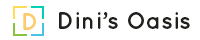
<style>
.page{position:relative;width:200px;height:40px;background:#ffffff}
.page>*{position:absolute;margin:0}
.t1{font:24px "Quicksand-Bold";color:#fccc6c}
.t2{font:24px "Quicksand-Bold";color:#21201d}
</style>
<div class="page">
<p class="t1" style="left:23px;top:13px;width:13px;height:17px">D</p>
<p class="t2" style="left:59px;top:12px;width:131px;height:17px">Dini’s Oasis</p>
</div>
